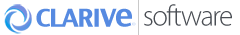
<style>
.page{position:relative;width:240px;height:35px;background:#ffffff}
.page>*{position:absolute;margin:0}
.t1{font:29.6px "MyriadPro-Light";letter-spacing:-0.05em;color:#4a4e54}
.t2{font:23.4px "CharcoalCY";letter-spacing:-0.055em;color:#568ae1;scale:1.1 1}
.t3{font:30.5px "CharcoalCY";letter-spacing:-0.055em;color:#568ae1}
.t4{font:4px "TwCenMT-Regular";letter-spacing:-0.075em;font-weight:bold;scale:1.1 1}
</style>
<div class="page">
<p class="t1" style="left:144px;top:4px;width:88px;height:22px">software</p>
<p class="t2" style="left:36px;top:8px;width:96px;height:19px">CLARIV<span class="t3">e</span></p>
<p class="t4" style="left:132px;top:22px;width:4px;height:4px">©</p>
</div>
